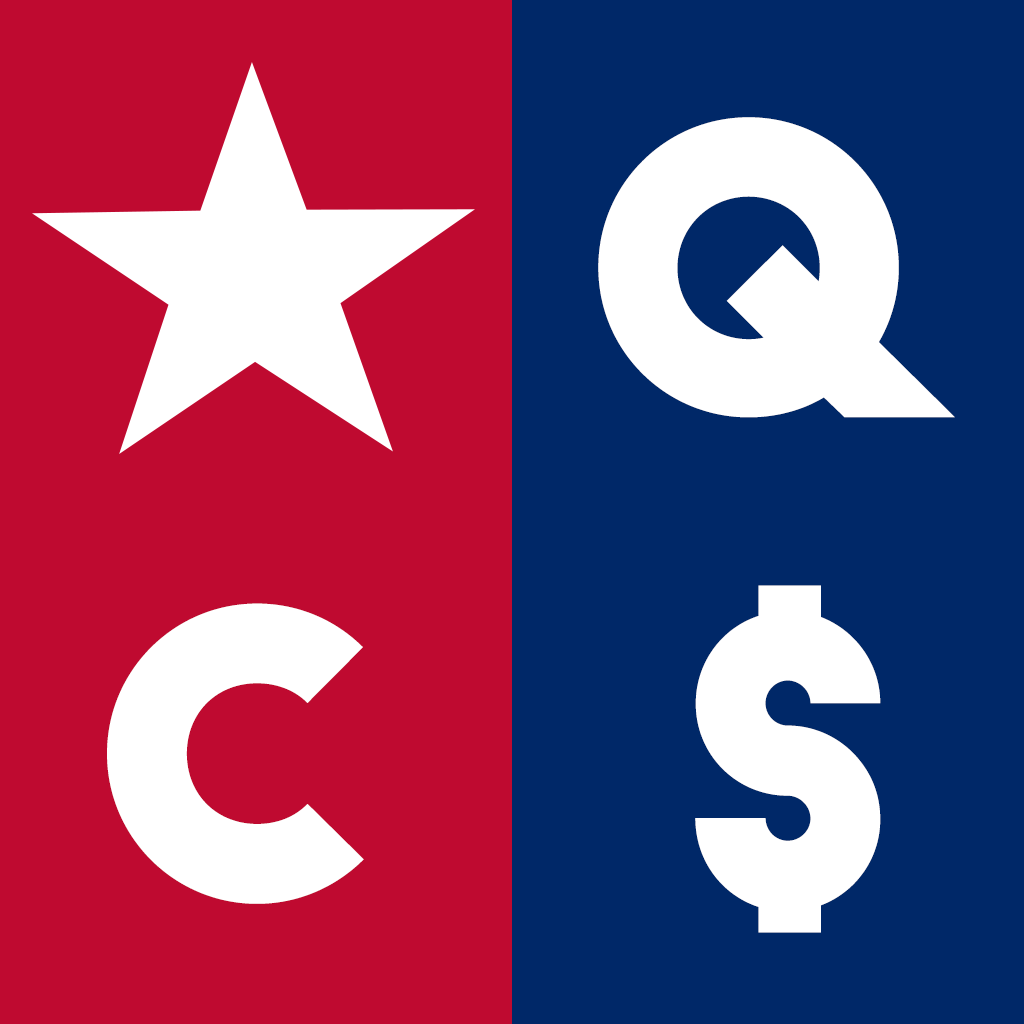
<style>
.page{position:relative;width:1024px;height:1024px;background:#bf0a30}
.page>*{position:absolute;margin:0}
.t1{font:400px "BigJohn";color:#ffffff}
</style>
<div class="page">
<p class="t1" style="left:598px;top:117px;width:357px;height:301px">Q</p>
<p class="t1" style="left:695px;top:585px;width:186px;height:348px">$</p>
<p class="t1" style="left:107px;top:603px;width:257px;height:301px">C</p>
</div>
